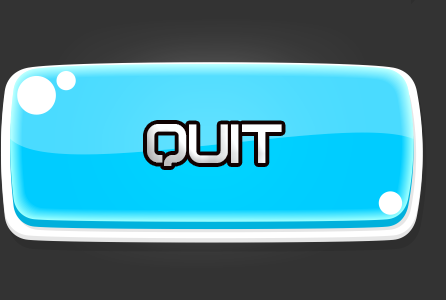
<style>
.page{position:relative;width:446px;height:300px;background:#333333}
.page>*{position:absolute;margin:0}
.t1{font:52px "Racer";color:#fdfeff;scale:0.96 1}
</style>
<div class="page">
<p class="t1" style="left:147px;top:124px;width:135px;height:42px">quit</p>
</div>
